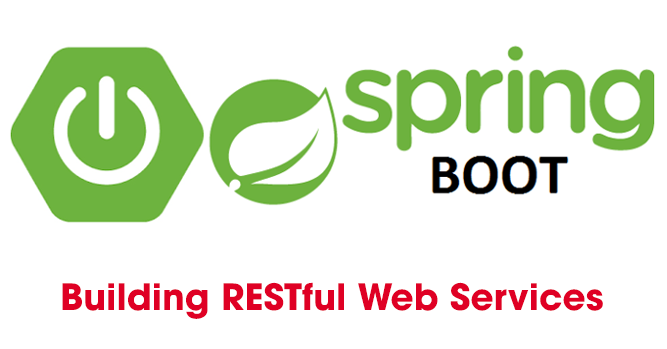
<style>
.page{position:relative;width:667px;height:349px;background:#ffffff}
.page>*{position:absolute;margin:0}
.t1{font:36px "UTMAvoBold";color:#df0024}
</style>
<div class="page">
<p class="t1" style="left:62px;top:282px;width:541px;height:37px">Building RESTful Web Services</p>
</div>
